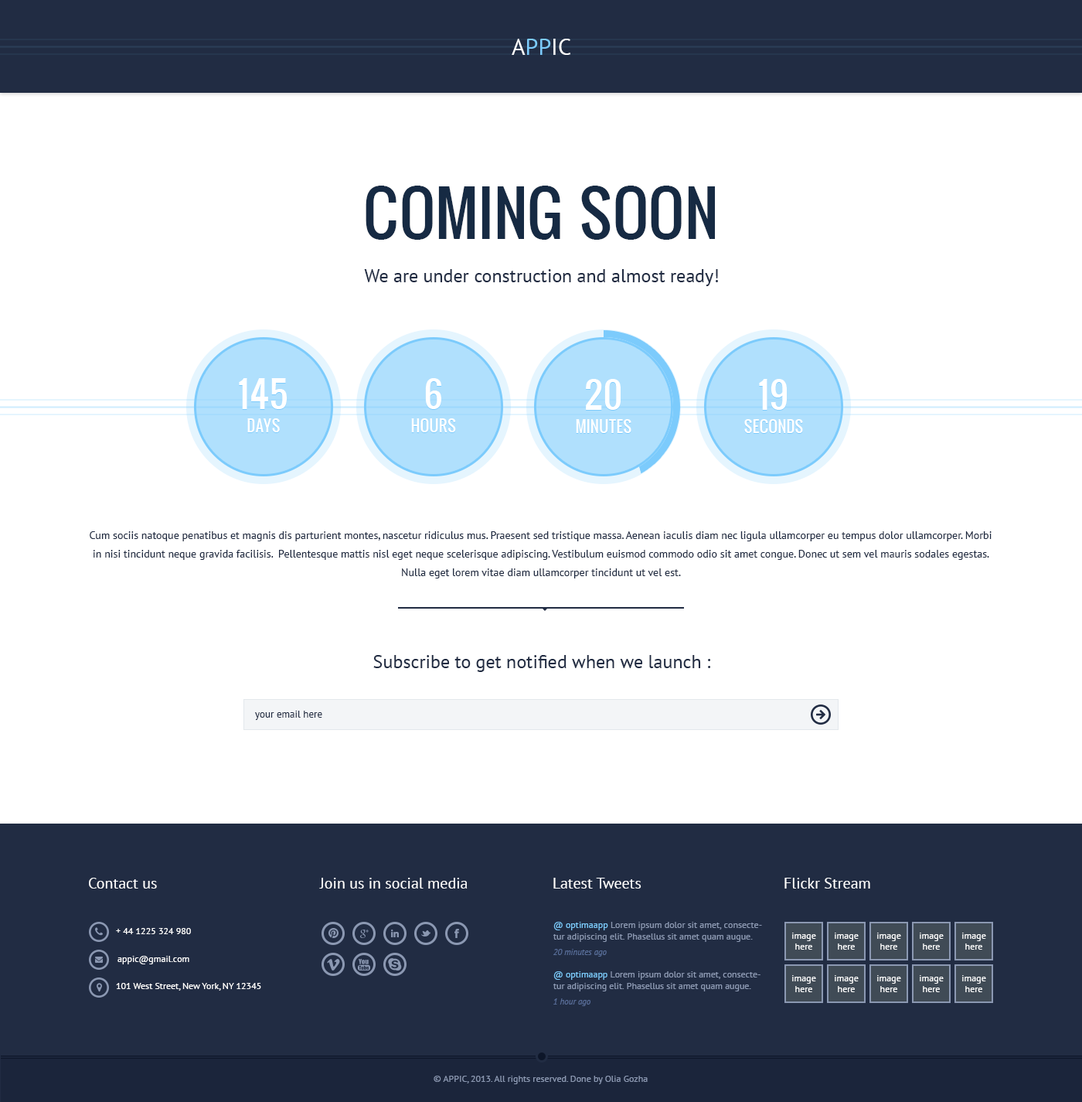
<style>
.page{position:relative;width:1082px;height:1102px;background:#ffffff}
.page>*{position:absolute;margin:0}
.t1{font:23.2px "PTSans-Regular";color:#7ccbfc;text-transform:uppercase}
.t2{font:23.2px "PTSans-Regular";color:#ffffff;text-transform:uppercase}
.t3{font:60.3px "Oswald";color:#162a43;text-transform:uppercase}
.t4{font:18.6px "PTSans-Regular";color:#212c43}
.t5{font:35.6px "Oswald";color:#ffffff;text-transform:uppercase}
.t6{font:15.5px "Oswald";color:#ffffff;text-transform:uppercase}
.t7{font:10.8px/18.6px "PTSans-Regular";color:#212c43}
.t8{font:10.1px "PTSans-Regular";color:#212c43}
.t9{font:15.5px "PTSans-Regular";color:#ffffff}
.t10{font:9.3px "PTSans-Regular";color:#ffffff}
.t11{font:9.3px "PTSans-Regular";color:#8b98b2}
.t12{font:9.3px "PTSans-Regular";color:#7ccbfc}
.t13{font:8.5px "PTSans-Italic";color:#576d98}
.t14{font:8.5px "PTSans-Italic";color:#586d98}
</style>
<div class="page">
<p class="t1" style="left:512px;top:39px;width:59px;height:16px"><span class="t2">A</span>pp<span class="t2">ic</span></p>
<p class="t3" style="left:366px;top:186px;width:349px;height:54px">coming soon</p>
<p class="t4" style="left:364px;top:269px;width:354px;height:17px">We are under construction and almost ready!</p>
<p class="t5" style="left:239px;top:379px;width:48px;height:31px">145</p>
<p class="t5" style="left:239px;top:378px;width:48px;height:31px">145</p>
<p class="t5" style="left:425px;top:379px;width:16px;height:31px">6</p>
<p class="t5" style="left:425px;top:378px;width:16px;height:31px">6</p>
<p class="t5" style="left:586px;top:380px;width:35px;height:31px">20</p>
<p class="t5" style="left:586px;top:379px;width:35px;height:31px">20</p>
<p class="t5" style="left:759px;top:380px;width:28px;height:31px">19</p>
<p class="t5" style="left:759px;top:379px;width:28px;height:31px">19</p>
<p class="t6" style="left:247px;top:419px;width:33px;height:14px">days</p>
<p class="t6" style="left:247px;top:418px;width:33px;height:14px">days</p>
<p class="t6" style="left:411px;top:419px;width:45px;height:14px">hours</p>
<p class="t6" style="left:411px;top:418px;width:45px;height:14px">hours</p>
<p class="t6" style="left:576px;top:420px;width:56px;height:14px">minutes</p>
<p class="t6" style="left:576px;top:419px;width:56px;height:14px">minutes</p>
<p class="t6" style="left:745px;top:420px;width:58px;height:14px">seconds</p>
<p class="t6" style="left:745px;top:419px;width:58px;height:14px">seconds</p>
<p class="t7" style="left:90px;top:531px;width:902px;height:47px;text-align:center">Cum sociis natoque penatibus et magnis dis parturient montes, nascetur ridiculus mus. Praesent sed tristique massa. Aenean iaculis diam nec ligula ullamcorper eu tempus dolor ullamcorper. Morbi in nisi tincidunt neque gravida facilisis.  Pellentesque mattis nisl eget neque scelerisque adipiscing. Vestibulum euismod commodo odio sit amet congue. Donec ut sem vel mauris sodales egestas. Nulla eget lorem vitae diam ullamcorper tincidunt ut vel est.</p>
<p class="t4" style="left:373px;top:655px;width:338px;height:17px">Subscribe to get notified when we launch :</p>
<p class="t8" style="left:255px;top:710px;width:67px;height:10px">your email here</p>
<p class="t9" style="left:89px;top:877px;width:68px;height:11px">Contact us</p>
<p class="t9" style="left:319px;top:877px;width:149px;height:11px">Join us in social media</p>
<p class="t9" style="left:554px;top:877px;width:88px;height:11px">Latest Tweets</p>
<p class="t9" style="left:785px;top:877px;width:86px;height:11px">Flickr Stream</p>
<p class="t10" style="left:116px;top:928px;width:75px;height:6px">+ 44 1225 324 980</p>
<p class="t11" style="left:554px;top:922px;width:208px;height:20px"><span class="t12">@ optimaapp </span>Lorem ipsum dolor sit amet, consectetur adipiscing elit. Phasellus sit amet quam augue.</p>
<p class="t10" style="left:792px;top:932px;width:24px;height:17px;text-align:center">image<br>here</p>
<p class="t10" style="left:835px;top:932px;width:24px;height:17px;text-align:center">image<br>here</p>
<p class="t10" style="left:877px;top:932px;width:24px;height:17px;text-align:center">image<br>here</p>
<p class="t10" style="left:920px;top:932px;width:24px;height:17px;text-align:center">image<br>here</p>
<p class="t10" style="left:963px;top:932px;width:23px;height:17px;text-align:center">image<br>here</p>
<p class="t13" style="left:554px;top:949px;width:53px;height:7px">20 minutes ago</p>
<p class="t10" style="left:118px;top:956px;width:71px;height:8px">appic@gmail.com</p>
<p class="t11" style="left:554px;top:971px;width:207px;height:20px"><span class="t12">@ optimaapp </span>Lorem ipsum dolor sit amet, consectetur adipiscing elit. Phasellus sit amet quam augue.</p>
<p class="t10" style="left:792px;top:975px;width:24px;height:17px;text-align:center">image<br>here</p>
<p class="t10" style="left:835px;top:975px;width:24px;height:17px;text-align:center">image<br>here</p>
<p class="t10" style="left:877px;top:975px;width:24px;height:17px;text-align:center">image<br>here</p>
<p class="t10" style="left:920px;top:975px;width:24px;height:17px;text-align:center">image<br>here</p>
<p class="t10" style="left:963px;top:975px;width:23px;height:17px;text-align:center">image<br>here</p>
<p class="t10" style="left:116px;top:983px;width:145px;height:7px">101 West Street, New York, NY 12345</p>
<p class="t14" style="left:554px;top:998px;width:37px;height:8px">1 hour ago</p>
<p class="t11" style="left:434px;top:1075px;width:214px;height:9px">© APPIC, 2013. All rights reserved. Done by Olia Gozha</p>
</div>
